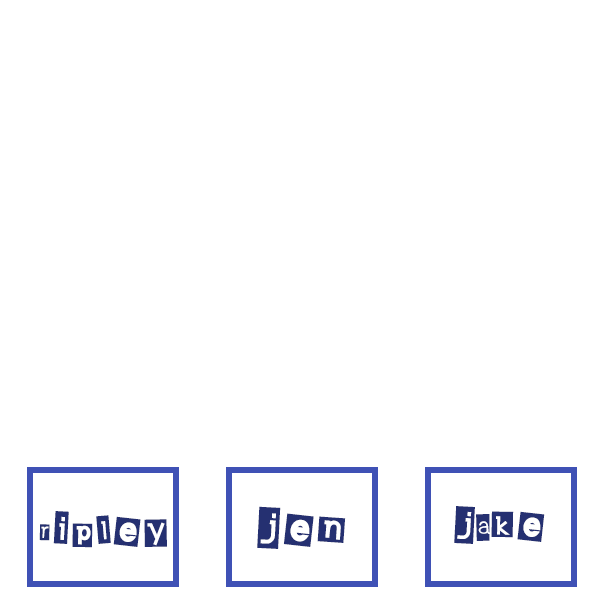
<style>
.page{position:relative;width:600px;height:600px;background:#ffffff}
.page>*{position:absolute;margin:0}
.t1{font:50px "EarwigFactory";color:#253071}
.t2{font:45px "EarwigFactory";color:#253071}
</style>
<div class="page">
<p class="t1" style="left:257px;top:506px;width:89px;height:43px">jen</p>
<p class="t2" style="left:454px;top:506px;width:91px;height:38px">jake</p>
<p class="t2" style="left:39px;top:511px;width:128px;height:37px">ripley</p>
</div>
